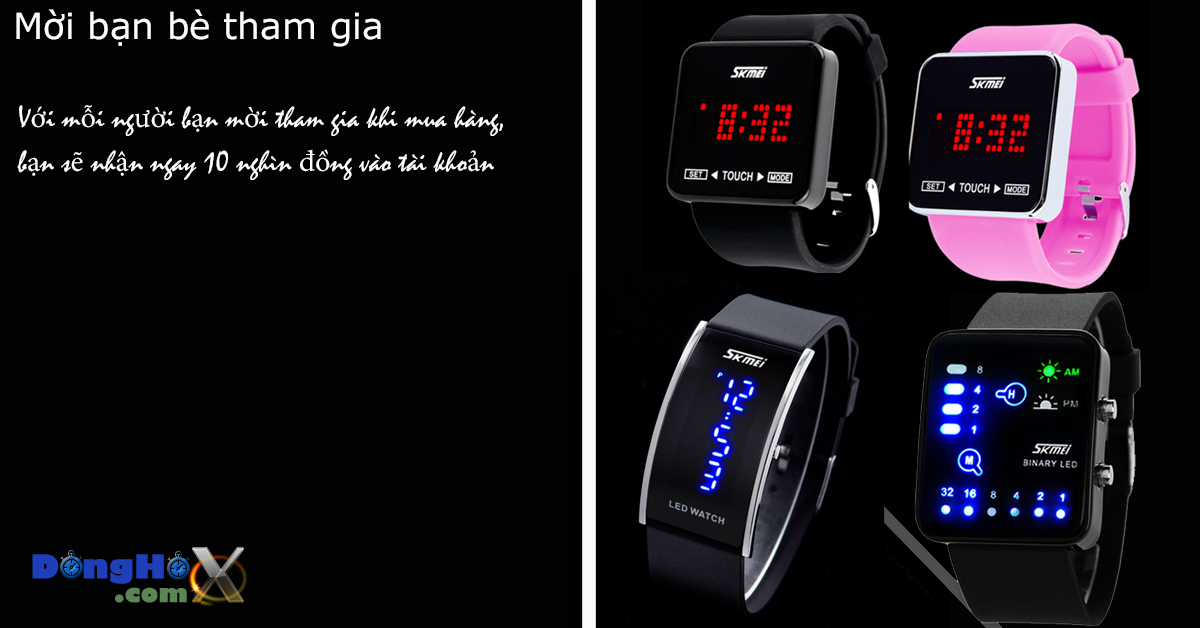
<style>
.page{position:relative;width:1200px;height:628px;background:#030202}
.page>*{position:absolute;margin:0}
.t1{font:36px "MSReferenceSansSerif";color:#fefcfc}
.t2{font:30px/22px "Mistral";color:#fefcfc}
.t3{font:30px/22px "MinionPro-Regular";color:#fefcfc}
</style>
<div class="page">
<p class="t1" style="left:16px;top:9px;width:365px;height:38px">Mời bạn bè tham gia</p>
<p class="t2" style="left:17px;top:105px;width:486px;height:75px">V<span class="t3">ớ</span>i m<span class="t3">ỗ</span>i ng<span class="t3">ườ</span>i b<span class="t3">ạ</span>n m<span class="t3">ờ</span>i tham gia khi mua hàng, <br><br>b<span class="t3">ạ</span>n s<span class="t3">ẽ</span> nh<span class="t3">ậ</span>n ngay 10 nghìn <span class="t3">đồ</span>ng vào tài kho<span class="t3">ả</span>n</p>
</div>
